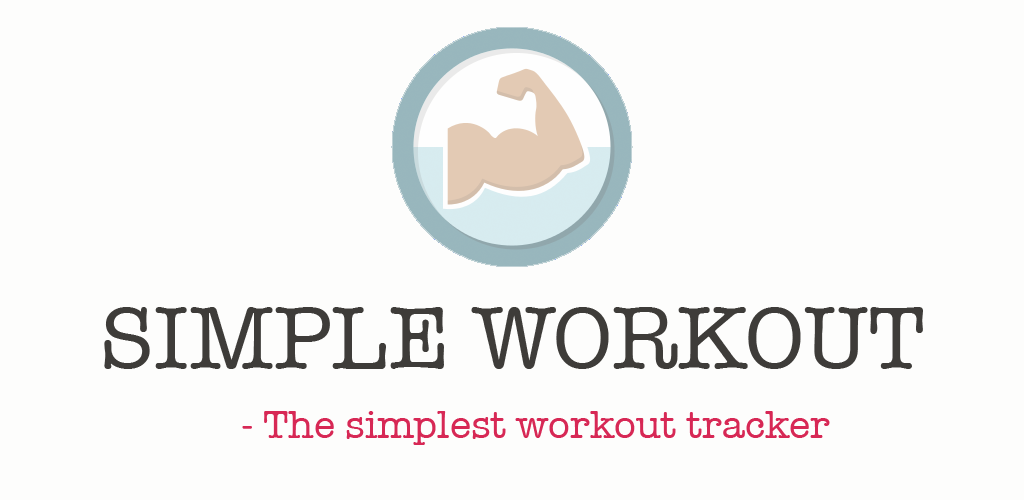
<style>
.page{position:relative;width:1024px;height:500px;background:#fdfdfc}
.page>*{position:absolute;margin:0}
.t1{font:90px "AmericanTypewriter";color:#3e3c39}
.t2{font:40px "AmericanTypewriter";color:#d72855}
</style>
<div class="page">
<p class="t1" style="left:104px;top:307px;width:819px;height:62px">SIMPLE WORKOUT</p>
<p class="t2" style="left:242px;top:411px;width:588px;height:34px">- The simplest workout tracker</p>
</div>
